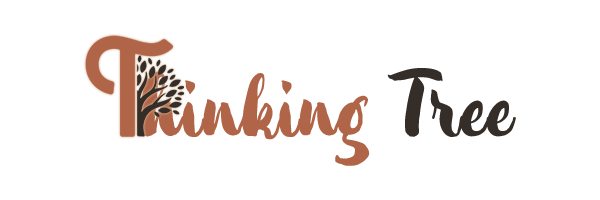
<style>
.page{position:relative;width:600px;height:200px;background:#ffffff}
.page>*{position:absolute;margin:0}
.t1{font:83.3px "InsforgenRegular";color:#b06548}
.t2{font:83.3px "InsforgenRegular";color:#352e28}
</style>
<div class="page">
<p class="t1" style="left:139px;top:68px;width:377px;height:98px">hinking <span class="t2">Tree</span></p>
</div>
